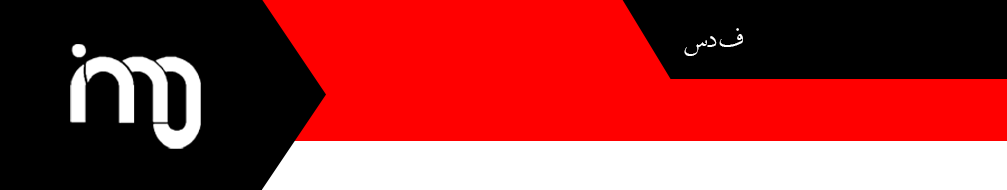
<style>
.page{position:relative;width:1007px;height:190px;background:#000000}
.page>*{position:absolute;margin:0}
.t1{font:36px "TraditionalArabic";color:#ffffff}
</style>
<div class="page">
<p class="t1" style="left:684px;top:28px;width:59px;height:28px">سدف</p>
</div>
